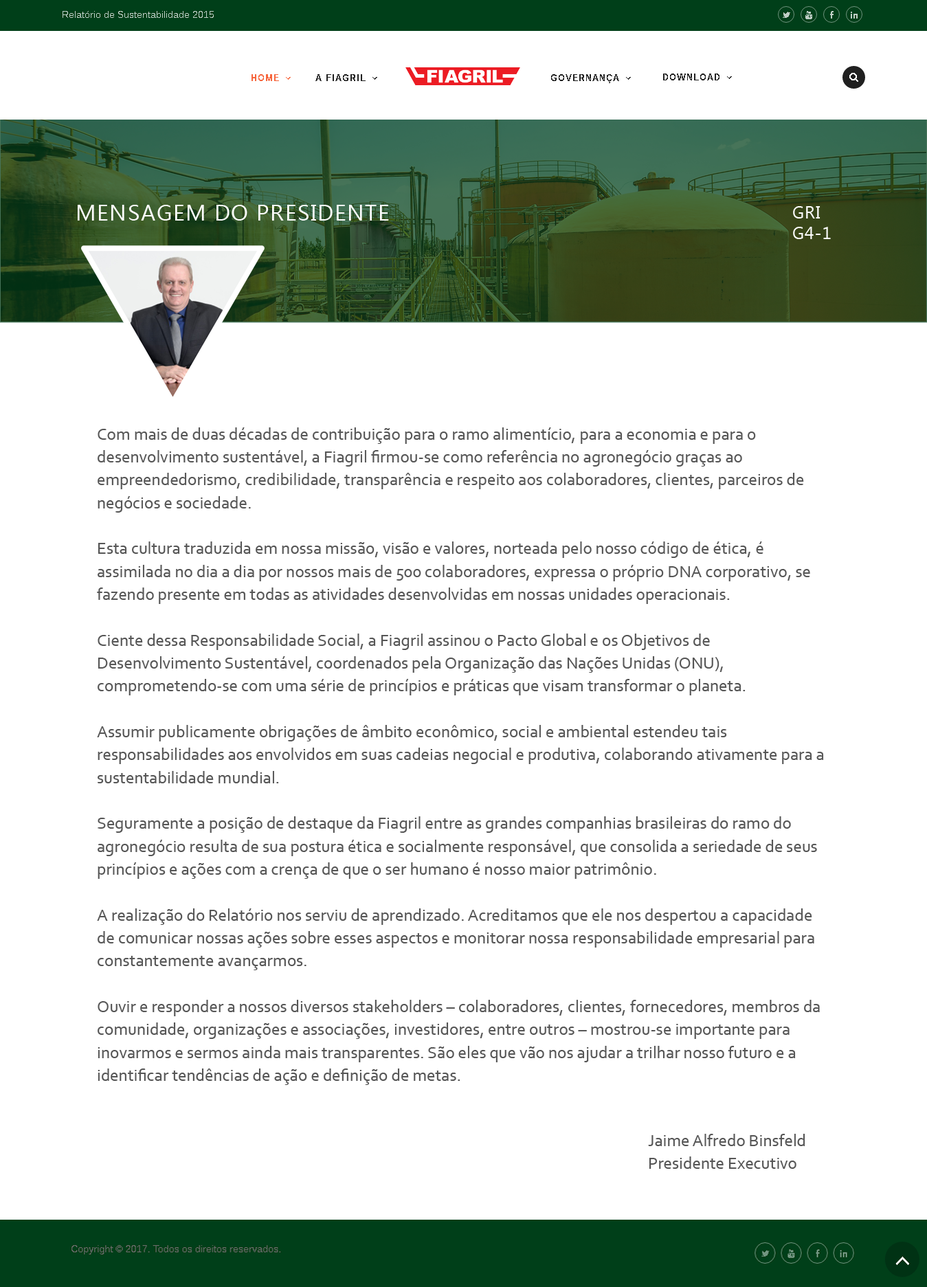
<style>
.page{position:relative;width:927px;height:1287px;background:#ffffff}
.page>*{position:absolute;margin:0}
.t1{font:22.9px "Ebrima";letter-spacing:0.04em;color:#ffffff}
.t2{font:17.2px "Ebrima";letter-spacing:0.04em;color:#ffffff}
.t3{font:17.2px/22.9px "Corbel";color:#565656}
</style>
<div class="page">
<p class="t1" style="left:78px;top:205px;width:311px;height:16px">MENSAGEM DO PRESIDENTE</p>
<p class="t2" style="left:793px;top:206px;width:38px;height:33px;text-align:justify">GRI<br>G4-1</p>
<p class="t3" style="left:97px;top:427px;width:727px;height:658px">Com mais de duas décadas de contribuição para o ramo alimentício, para a economia e para o desenvolvimento sustentável, a Fiagril ﬁrmou-se como referência no agronegócio graças ao empreendedorismo, credibilidade, transparência e respeito aos colaboradores, clientes, parceiros de negócios e sociedade.<br><br>Esta cultura traduzida em nossa missão, visão e valores, norteada pelo nosso código de ética, é assimilada no dia a dia por nossos mais de 500 colaboradores, expressa o próprio DNA corporativo, se fazendo presente em todas as atividades desenvolvidas em nossas unidades operacionais. <br><br>Ciente dessa Responsabilidade Social, a Fiagril assinou o Pacto Global e os Objetivos de Desenvolvimento Sustentável, coordenados pela Organização das Nações Unidas (ONU), comprometendo-se com uma série de princípios e práticas que visam transformar o planeta.<br><br>Assumir publicamente obrigações de âmbito econômico, social e ambiental estendeu tais responsabilidades aos envolvidos em suas cadeias negocial e produtiva, colaborando ativamente para a sustentabilidade mundial.<br><br>Seguramente a posição de destaque da Fiagril entre as grandes companhias brasileiras do ramo do agronegócio resulta de sua postura ética e socialmente responsável, que consolida a seriedade de seus princípios e ações com a crença de que o ser humano é nosso maior patrimônio.<br><br>A realização do Relatório nos serviu de aprendizado. Acreditamos que ele nos despertou a capacidade de comunicar nossas ações sobre esses aspectos e monitorar nossa responsabilidade empresarial para constantemente avançarmos.<br><br>Ouvir e responder a nossos diversos stakeholders – colaboradores, clientes, fornecedores, membros da comunidade, organizações e associações, investidores, entre outros – mostrou-se importante para inovarmos e sermos ainda mais transparentes. São eles que vão nos ajudar a trilhar nosso futuro e a identiﬁcar tendências de ação e deﬁnição de metas.</p>
<p class="t3" style="left:648px;top:1134px;width:157px;height:35px;text-align:justify">Jaime Alfredo Binsfeld<br>Presidente Executivo</p>
</div>
